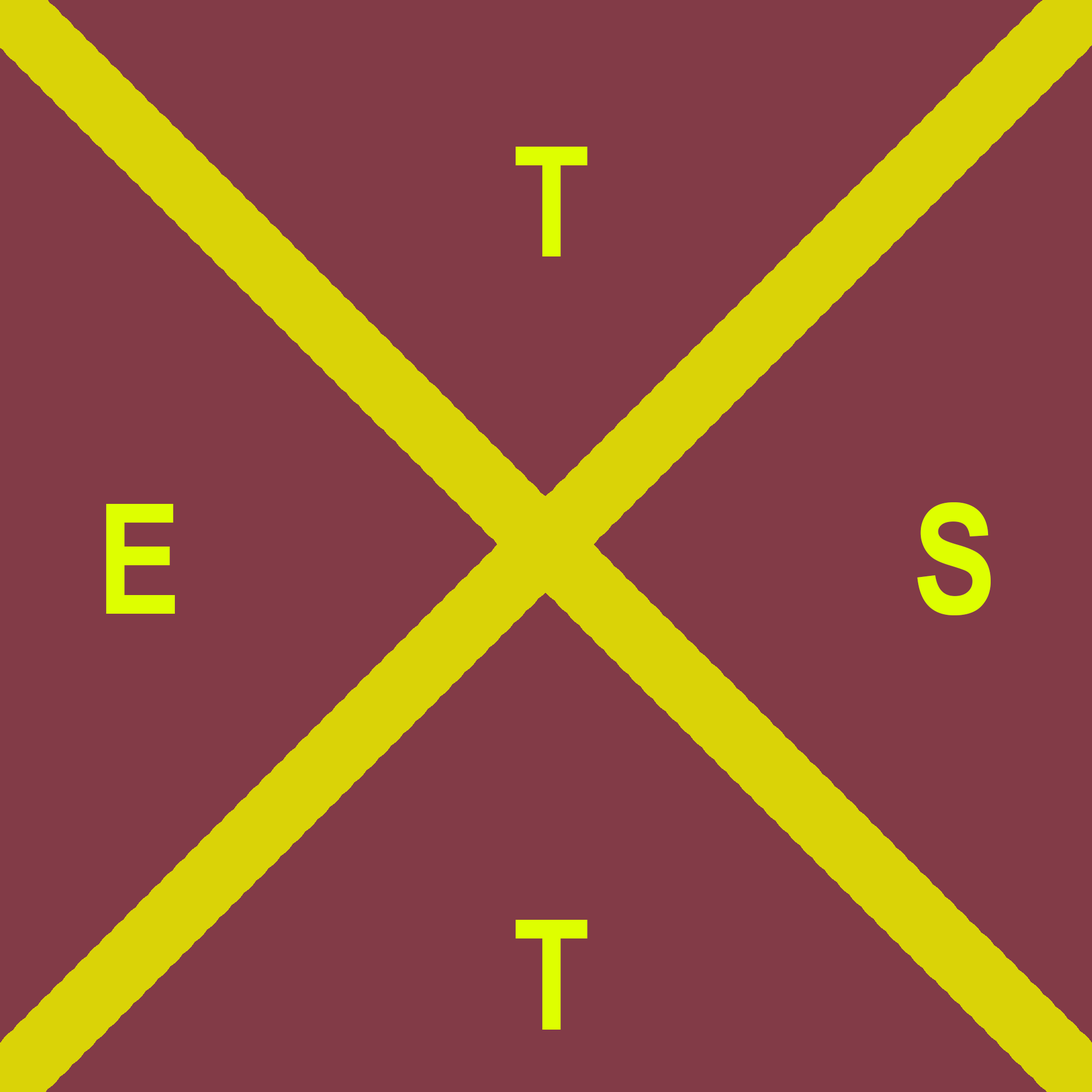
<style>
.page{position:relative;width:1092px;height:1092px;background:#823b47}
.page>*{position:absolute;margin:0}
.t1{font:153.6px "ArialNarrow-Bold";color:#deff00}
</style>
<div class="page">
<p class="t1" style="left:516px;top:147px;width:72px;height:109px">T</p>
<p class="t1" style="left:106px;top:504px;width:69px;height:110px">E</p>
<p class="t1" style="left:917px;top:502px;width:74px;height:113px">S</p>
<p class="t1" style="left:516px;top:920px;width:72px;height:110px">T</p>
</div>
